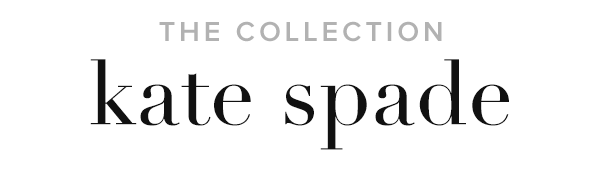
<style>
.page{position:relative;width:600px;height:175px;background:#ffffff}
.page>*{position:absolute;margin:0}
.t1{font:28.5px "ProximaNova-Semibold";letter-spacing:0.14em;color:#b2b2b2;text-transform:uppercase}
.t2{font:90px "Didot";color:#111111}
</style>
<div class="page">
<p class="t1" style="left:159px;top:21px;width:283px;height:21px">the collection</p>
<p class="t2" style="left:90px;top:59px;width:419px;height:91px">kate spade</p>
</div>
